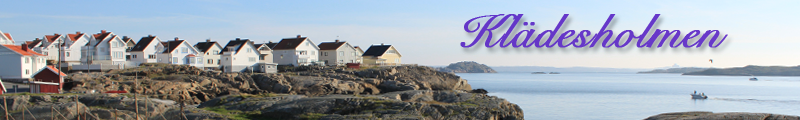
<style>
.page{position:relative;width:800px;height:120px}
.page>*{position:absolute;margin:0}
.t1{font:48px "SnellRoundhand";color:#6637c8;font-weight:bold}
</style>
<div class="page">
<p class="t1" style="left:460px;top:14px;width:268px;height:34px">Klädesholmen</p>
</div>
